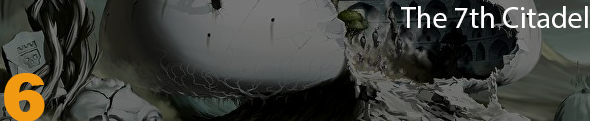
<style>
.page{position:relative;width:590px;height:121px}
.page>*{position:absolute;margin:0}
.t1{font:30px "MyriadPro-Regular";color:#ffffff}
.t2{font:70px "Rockwell-ExtraBold";color:#f09911}
</style>
<div class="page">
<p class="t1" style="left:401px;top:6px;width:187px;height:22px">The 7th Citadel</p>
<p class="t2" style="left:4px;top:73px;width:41px;height:49px">6</p>
</div>
